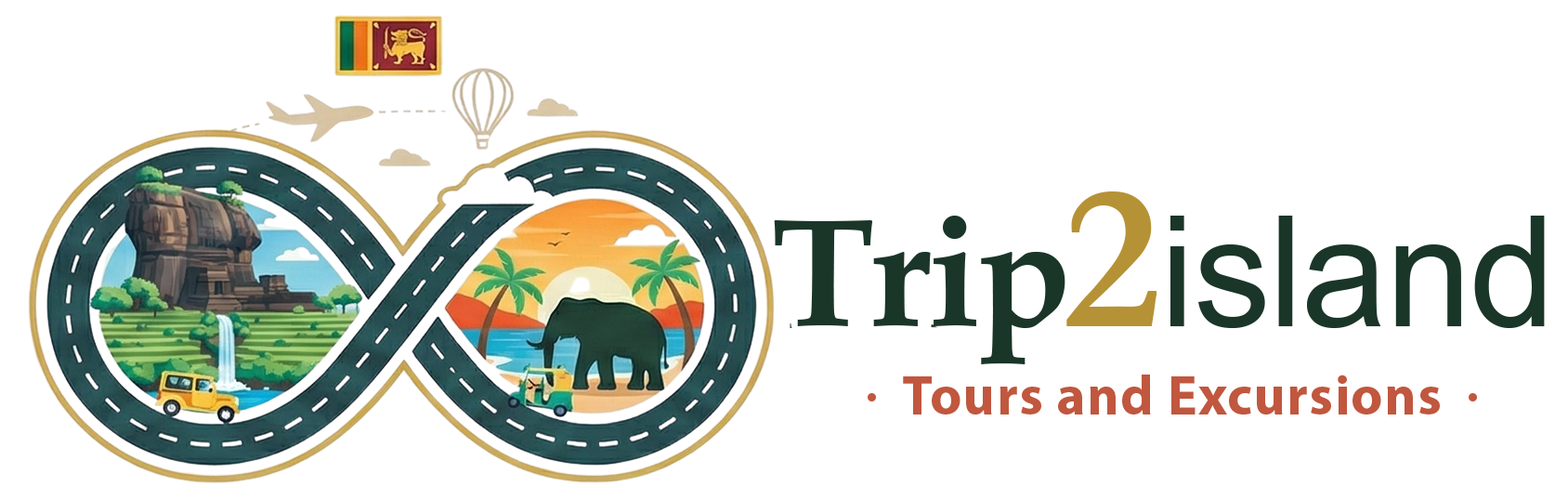
<style>
.page{position:relative;width:1568px;height:500px;background:#ffffff}
.page>*{position:absolute;margin:0}
.t1{font:209px "Garamond-Bold";letter-spacing:-0.05em;color:#b69236}
.t2{font:154.2px "BookAntiqua-Bold";letter-spacing:-0.02em;color:#1a3628}
.t3{font:154.2px "ArialMT";letter-spacing:-0.01em;color:#1a3628}
.t4{font:55.7px "MyriadPro-Bold";letter-spacing:0.02em;color:#c0573e}
</style>
<div class="page">
<p class="t1" style="left:1066px;top:191px;width:91px;height:135px">2</p>
<p class="t2" style="left:774px;top:216px;width:291px;height:148px">Trip</p>
<p class="t3" style="left:1170px;top:216px;width:375px;height:112px">island</p>
<p class="t4" style="left:903px;top:374px;width:537px;height:40px">Tours and Excursions</p>
</div>
